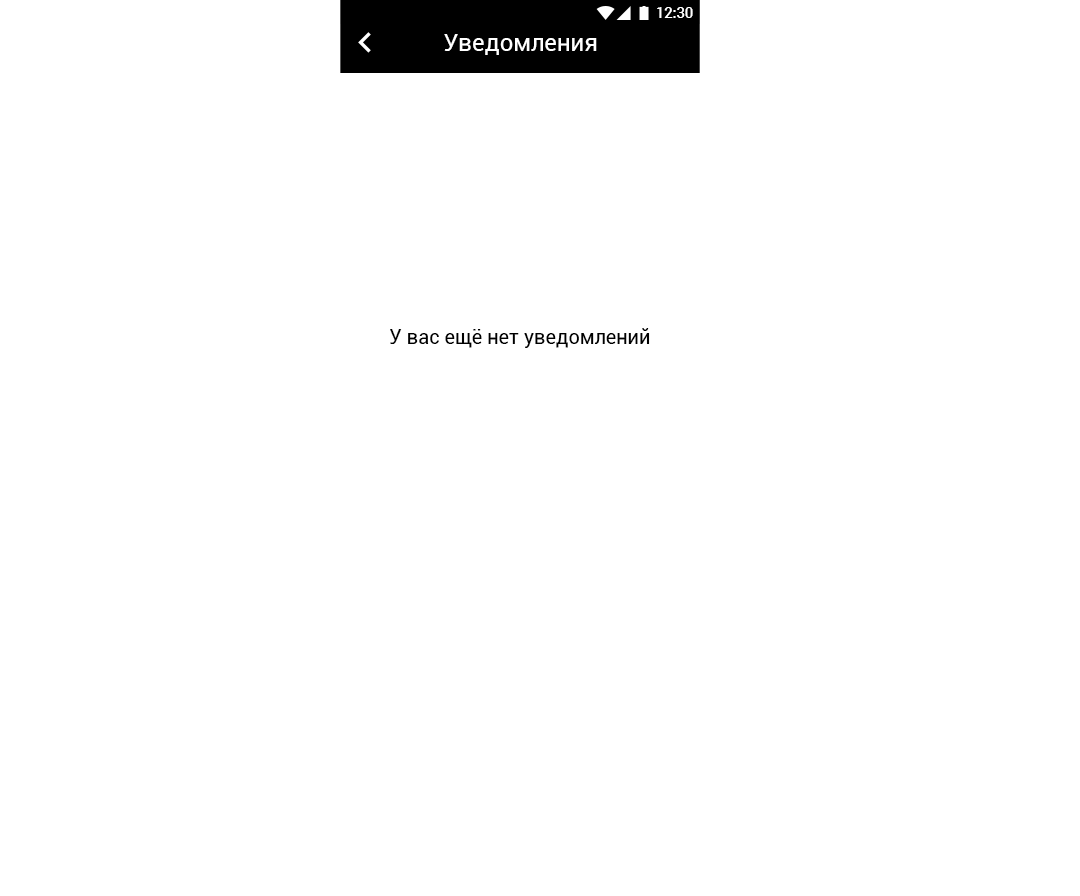
<style>
.page{position:relative;width:1080px;height:896px;background:#ffffff}
.page>*{position:absolute;margin:0}
.t1{font:14.6px "Roboto-Medium";color:#ffffff}
.t2{font:24px "Roboto-Regular";color:#ffffff}
.t3{font:20px "Roboto-Regular";color:#000000}
</style>
<div class="page">
<p class="t1" style="left:657px;top:7px;width:36px;height:11px">12:30</p>
<p class="t2" style="left:444px;top:34px;width:153px;height:21px">Уведомления</p>
<p class="t3" style="left:390px;top:328px;width:260px;height:20px">У вас ещё нет уведомлений</p>
</div>
